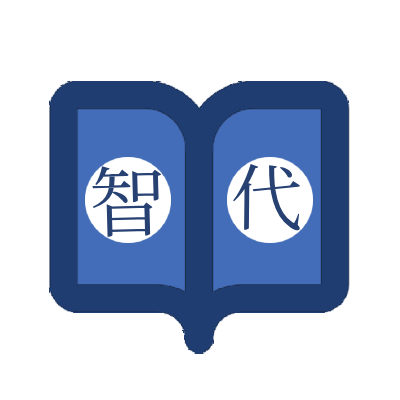
<style>
.page{position:relative;width:400px;height:400px;background:#ffffff}
.page>*{position:absolute;margin:0}
.t1{font:77.2px "NotoSerifJP-Regular";color:#274173}
.t2{font:71.8px "NotoSerifJP-Regular";color:#274173}
.t3{font:71.8px "NotoSerifJP-Regular";color:#133d5b}
</style>
<div class="page">
<p class="t1" style="left:92px;top:166px;width:70px;height:71px;rotate:-2deg">智</p>
<p class="t2" style="left:233px;top:164px;width:67px;height:67px;rotate:1deg"><span class="t3"><br></span>代</p>
</div>
